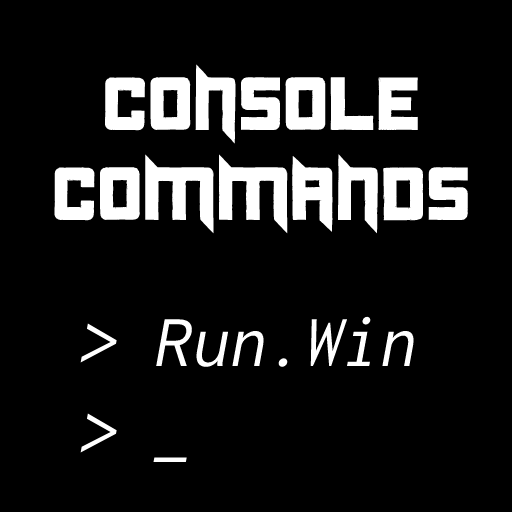
<style>
.page{position:relative;width:512px;height:512px;background:#000000}
.page>*{position:absolute;margin:0}
.t1{font:75px "Duplexide";color:#ffffff}
.t2{font:75px "Inconsolata-Regular";color:#ffffff;font-style:italic}
</style>
<div class="page">
<p class="t1" style="left:54px;top:64px;width:414px;height:170px;text-align:center">Console<br>COMMANDS</p>
<p class="t2" style="left:80px;top:316px;width:335px;height:146px">&gt; Run.Win<br>&gt; _</p>
</div>
